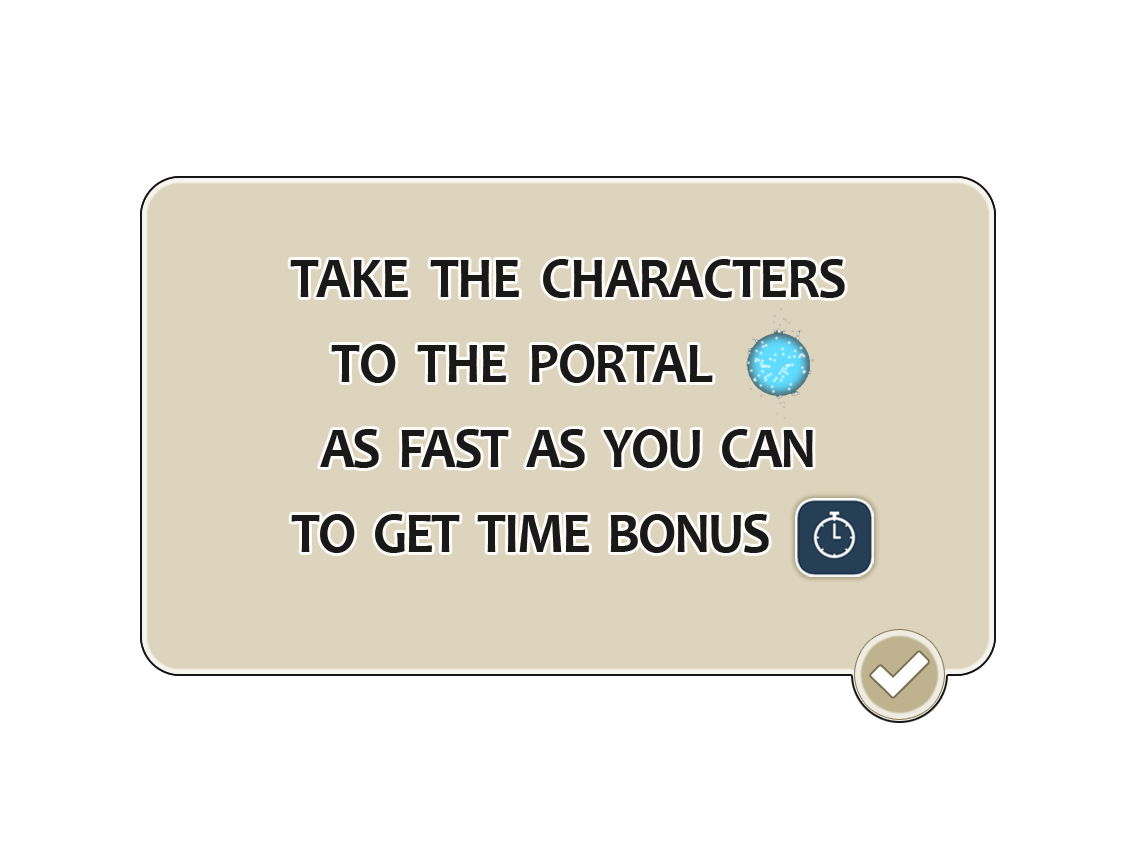
<style>
.page{position:relative;width:1136px;height:852px;background:#ffffff}
.page>*{position:absolute;margin:0}
.t1{font:57.8px/85px "Candara-Bold";letter-spacing:-0.04em;color:#191919;scale:0.94 1}
.t2{font:57.8px/85px "Candara-Bold";letter-spacing:-0.02em;color:#191919;scale:0.94 1}
</style>
<div class="page">
<p class="t1" style="left:290px;top:259px;width:555px;height:294px;text-align:center"><span class="t2">TAKE  THE  CHARACTERS<br>TO  THE  PORTAL    ----</span><br>AS  FAST  AS  YOU  CAN<br>TO  GET  TIME  BONUS   ----</p>
</div>
